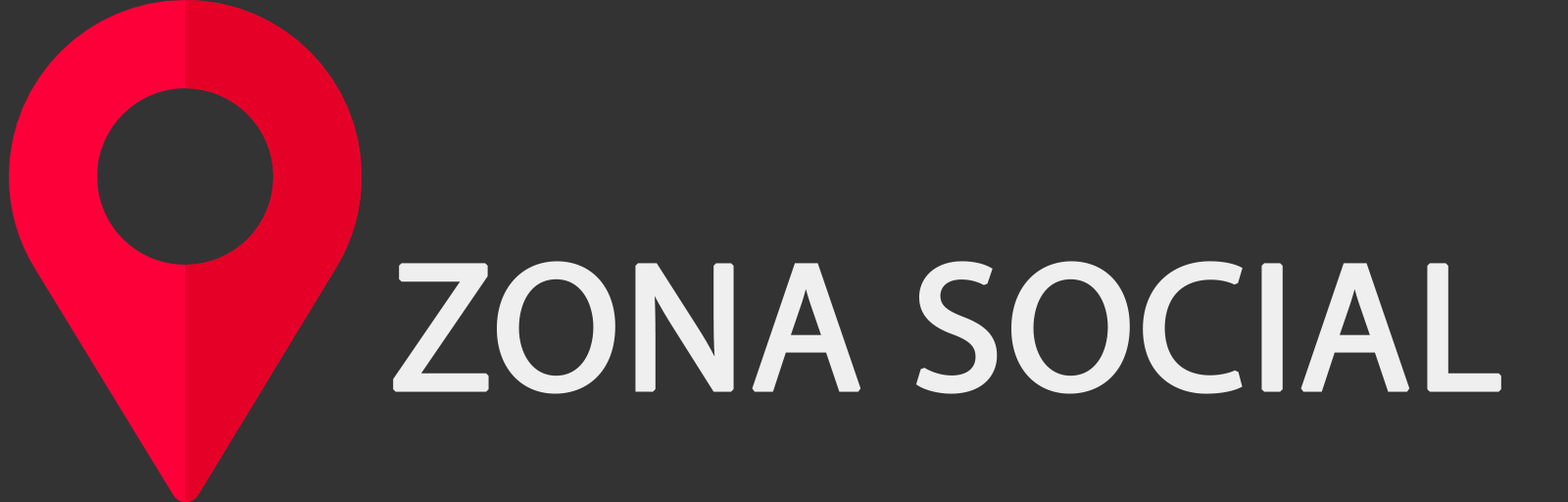
<style>
.page{position:relative;width:1568px;height:502px;background:#333333}
.page>*{position:absolute;margin:0}
.t1{font:183.7px "MyriadPro-Regular";color:#efefef;font-weight:bold}
</style>
<div class="page">
<p class="t1" style="left:393px;top:261px;width:1108px;height:133px">ZONA SOCIAL</p>
</div>
